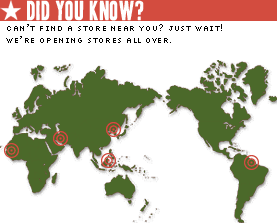
<style>
.page{position:relative;width:277px;height:223px;background:#ffffff}
.page>*{position:absolute;margin:0}
.t1{font:10px "LipoDVectorized";color:#000000;text-transform:uppercase}
</style>
<div class="page">
<p class="t1" style="left:6px;top:24px;width:216px;height:19px">Can’t find a store near you? Just wait! <br>we’re opening stores all over.</p>
</div>
